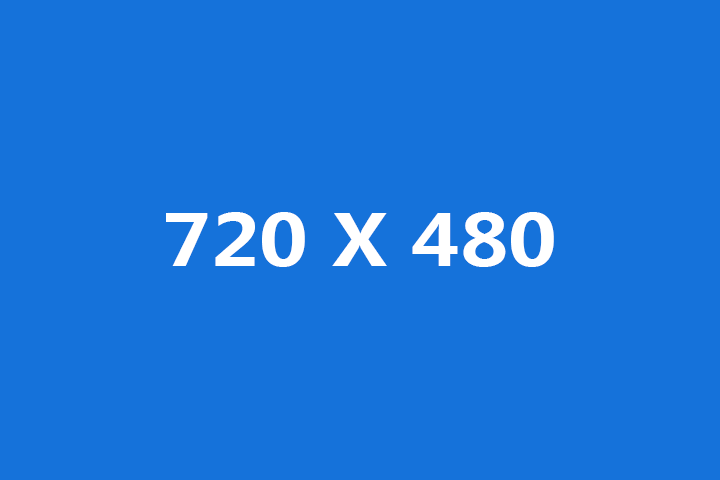
<style>
.page{position:relative;width:720px;height:480px;background:#1572da}
.page>*{position:absolute;margin:0}
.t1{font:70px "MicrosoftYaHei-Bold";color:#ffffff;scale:1.13 1}
</style>
<div class="page">
<p class="t1" style="left:166px;top:212px;width:388px;height:55px">720 X 480</p>
</div>
